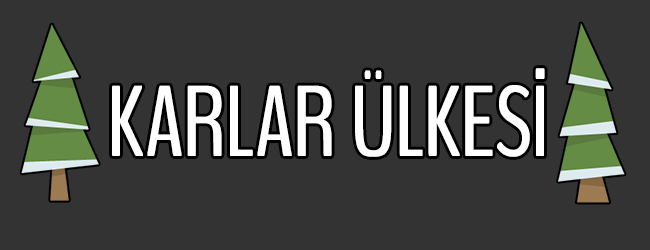
<style>
.page{position:relative;width:650px;height:250px;background:#333333}
.page>*{position:absolute;margin:0}
.t1{font:100px "BenchNine-Regular";color:#ffffff}
</style>
<div class="page">
<p class="t1" style="left:112px;top:68px;width:433px;height:89px">KARLAR ÜLKESİ</p>
</div>
